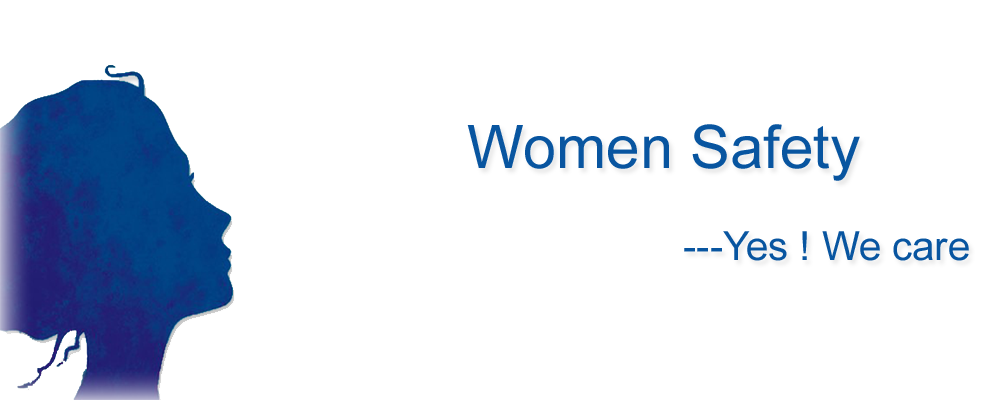
<style>
.page{position:relative;width:1000px;height:400px;background:#ffffff}
.page>*{position:absolute;margin:0}
.t1{font:59.9px "ArialMT";color:#0855a0}
.t2{font:40px "ArialMT";color:#0855a0}
</style>
<div class="page">
<p class="t1" style="left:467px;top:124px;width:393px;height:57px">Women Safety</p>
<p class="t2" style="left:684px;top:231px;width:285px;height:30px">---Yes ! We care</p>
</div>
